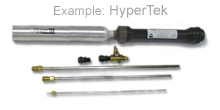
<style>
.page{position:relative;width:220px;height:110px;background:#ffffff}
.page>*{position:absolute;margin:0}
.t1{font:12.5px "ArialMT";color:#a6a5a5}
.t2{font:13.9px "ArialMT";color:#a6a5a5}
</style>
<div class="page">
<p class="t1" style="left:54px;top:5px;width:114px;height:13px">Example: <span class="t2">HyperTek</span></p>
</div>
